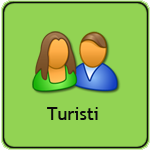
<style>
.page{position:relative;width:150px;height:150px;background:#92d353}
.page>*{position:absolute;margin:0}
.t1{font:18px "TrebuchetMS";color:#0b0b0b}
</style>
<div class="page">
<p class="t1" style="left:47px;top:107px;width:51px;height:13px">Turisti</p>
</div>
